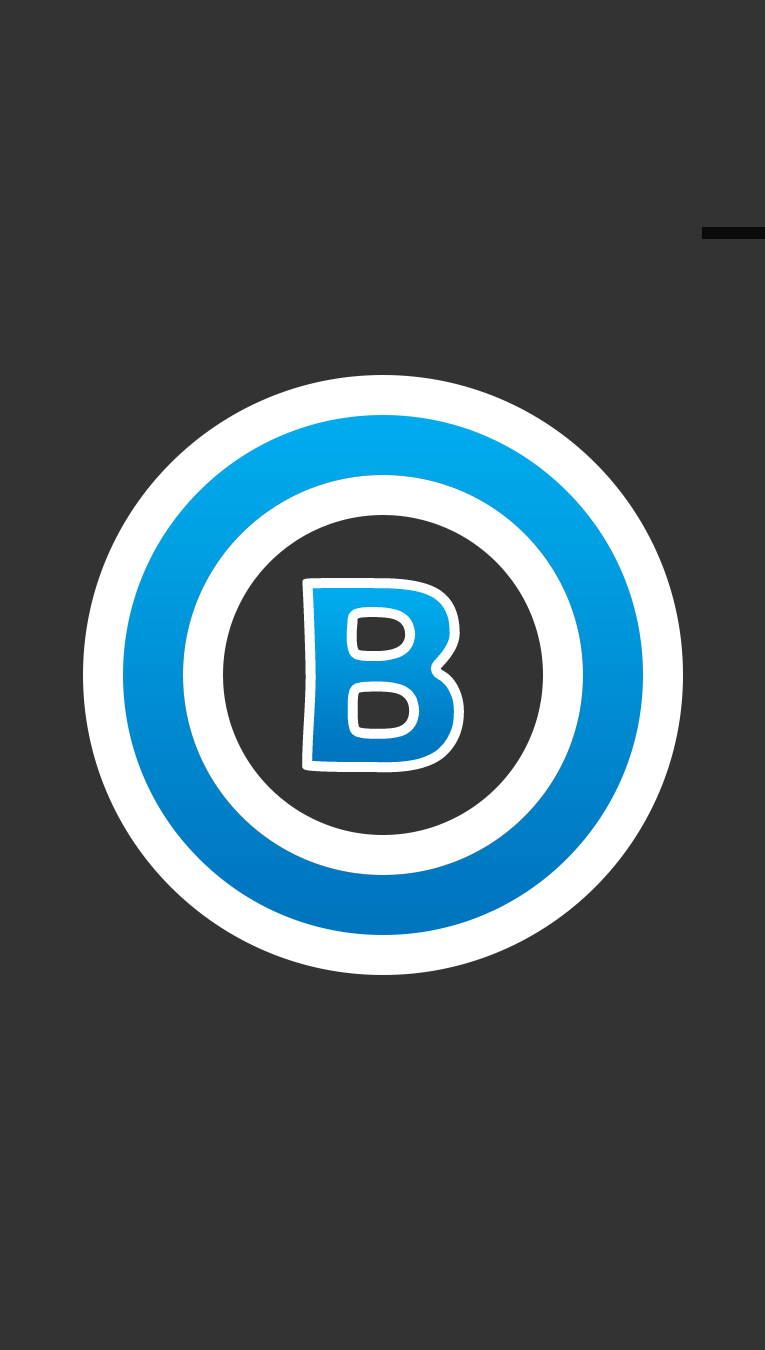
<style>
.page{position:relative;width:765px;height:1350px;background:#333333}
.page>*{position:absolute;margin:0}
.t1{font:280px "BerlinSansFBDemi-Bold";letter-spacing:0.2em}
</style>
<div class="page">
<p class="t1" style="left:302px;top:578px;width:162px;height:195px">B</p>
</div>
